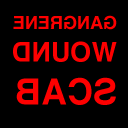
<style>
.page{position:relative;width:128px;height:128px;background:#000000}
.page>*{position:absolute;margin:0}
.t1{font:18px "Helvetica-Bold";color:#fd0000}
.t2{font:27px "Helvetica-Bold";color:#fd0000}
.t3{font:36px "Helvetica-Bold";color:#fd0000}
</style>
<div class="page">
<p class="t1" style="left:13px;top:15px;width:104px;height:90px;rotate:180deg">GANGRENE<br><span class="t2">WOUND<br></span><span class="t3">SCAB</span></p>
</div>
